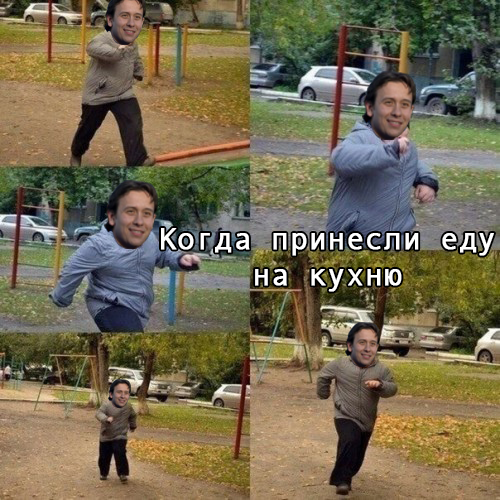
<style>
.page{position:relative;width:500px;height:500px}
.page>*{position:absolute;margin:0}
.t1{font:30px "AndaleMono";color:#ffffff;font-weight:bold}
</style>
<div class="page">
<p class="t1" style="left:161px;top:228px;width:333px;height:64px;text-align:center">Когда принесли еду<br>на кухню</p>
</div>
